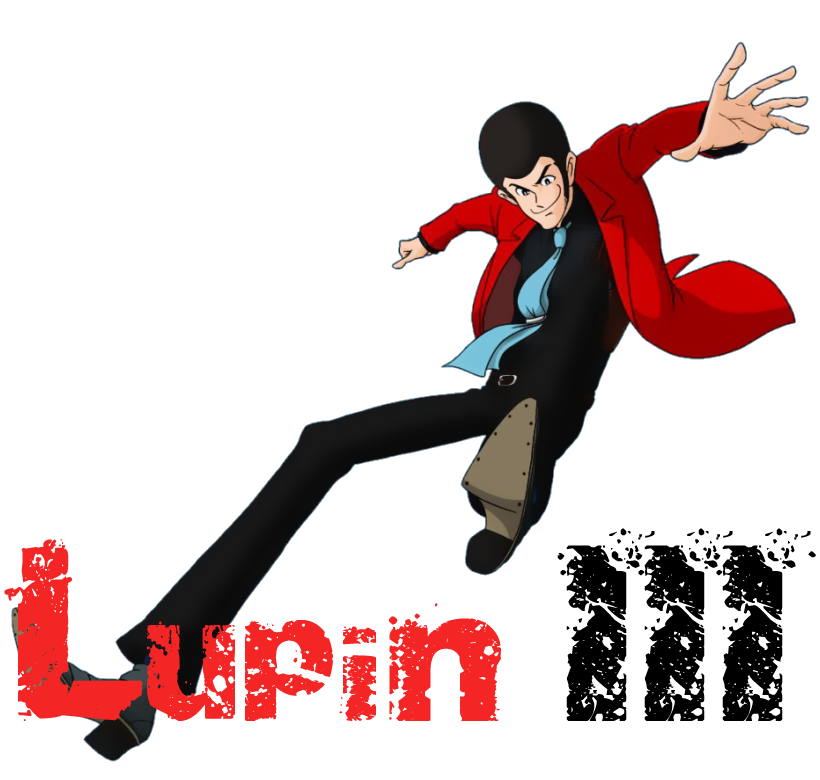
<style>
.page{position:relative;width:820px;height:780px;background:#ffffff}
.page>*{position:absolute;margin:0}
.t1{font:200px "SoulMission";color:#f42525}
.t2{font:200px "SoulMission";color:#000000}
</style>
<div class="page">
<p class="t1" style="left:4px;top:528px;width:812px;height:193px">Lupin<span class="t2"> III</span></p>
</div>
